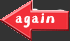
<style>
.page{position:relative;width:70px;height:41px;background:#333333}
.page>*{position:absolute;margin:0}
.t1{font:18px "zihun195hao-mengqubaiqiti";letter-spacing:0.05em;color:#fffefe}
</style>
<div class="page">
<p class="t1" style="left:15px;top:13px;width:40px;height:15px">again</p>
</div>
